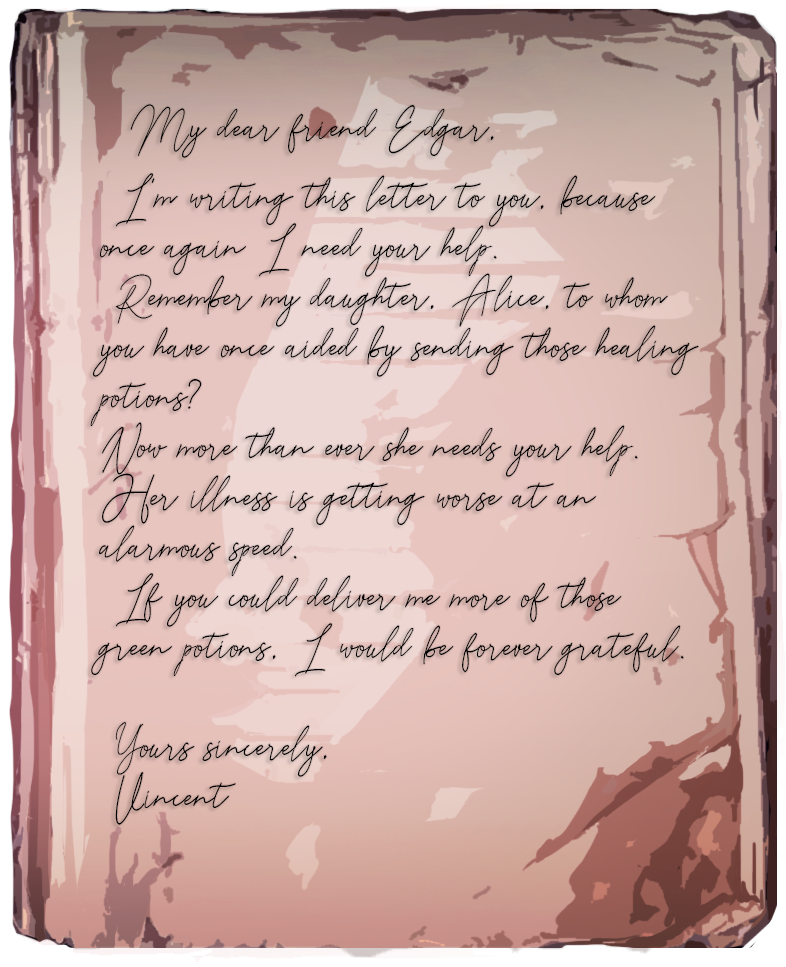
<style>
.page{position:relative;width:786px;height:967px}
.page>*{position:absolute;margin:0}
.t1{font:48px/50px "Reman";color:#000000}
.t2{font:48px/34px "Reman";color:#000000}
</style>
<div class="page">
<p class="t1" style="left:90px;top:104px;width:609px;height:721px"><span class="t2">  My dear friend Edgar,<br><br></span> I’m writing this letter to you, because<br>once again I need your help.<br> Remember my daughter, Alice, to whom<br>you have once aided by sending those healing<br>potions?<br>Now more than ever she needs your help.<br>Her illness is getting worse at an<br>alarmous speed.<br> If you could deliver me more of those<br>green potions, I would be forever grateful.<br><br> Yours sincerely,<br> Vincent</p>
</div>
